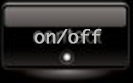
<style>
.page{position:relative;width:133px;height:83px}
.page>*{position:absolute;margin:0}
.t1{font:18px "Monaco";color:#bfbfbf;font-weight:bold}
</style>
<div class="page">
<p class="t1" style="left:34px;top:29px;width:68px;height:15px">on/off</p>
</div>
